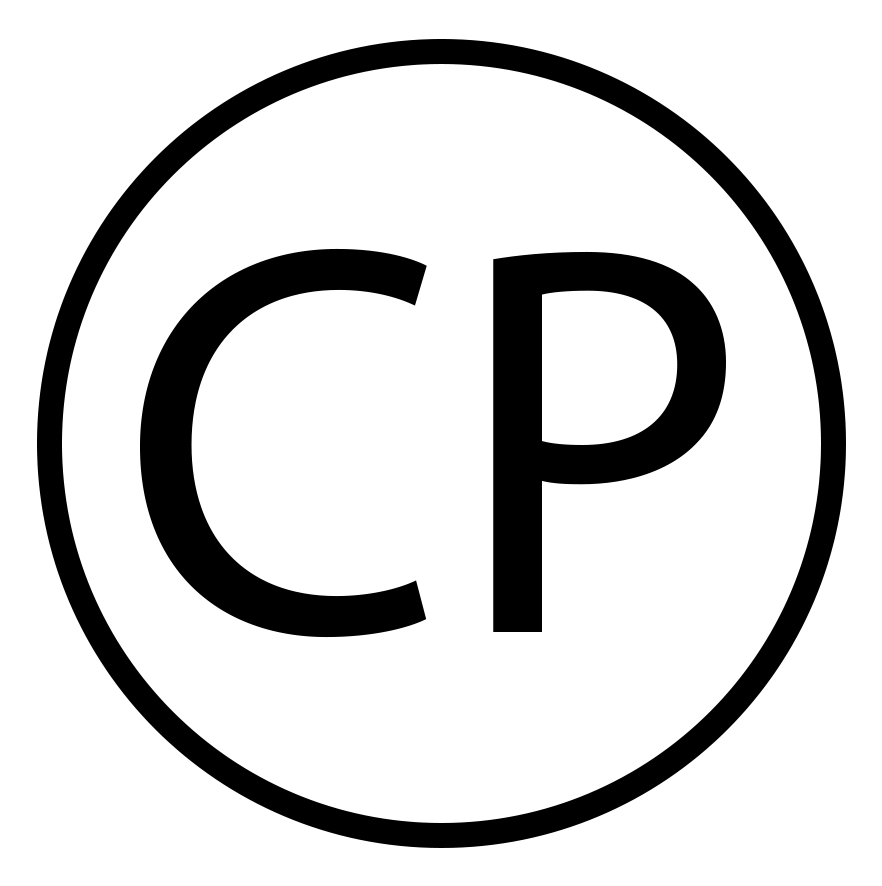
<style>
.page{position:relative;width:882px;height:886px;background:#ffffff}
.page>*{position:absolute;margin:0}
.t1{font:560px "MyriadPro-Regular";letter-spacing:0.01em;color:#000000}
</style>
<div class="page">
<p class="t1" style="left:140px;top:248px;width:586px;height:390px">CP</p>
</div>
